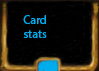
<style>
.page{position:relative;width:99px;height:71px;background:#000000}
.page>*{position:absolute;margin:0}
.t1{font:12px "MyriadPro-Regular";color:#00aeef}
</style>
<div class="page">
<p class="t1" style="left:23px;top:15px;width:24px;height:23px">Card<br>stats</p>
</div>
